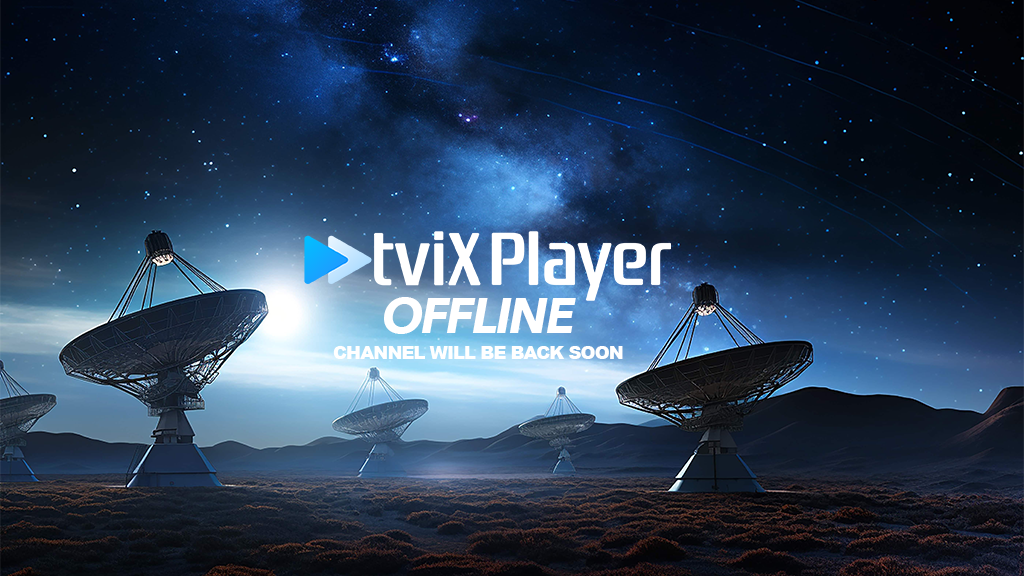
<style>
.page{position:relative;width:1024px;height:576px}
.page>*{position:absolute;margin:0}
.t1{font:50px "AvenirNext-BoldItalic";letter-spacing:-0.05em;color:#ffffff}
.t2{font:18px "Arial-Black";letter-spacing:-0.05em;color:#ffffff}
</style>
<div class="page">
<p class="t1" style="left:384px;top:297px;width:192px;height:37px">OFFLINE</p>
<p class="t2" style="left:333px;top:346px;width:290px;height:13px">CHANNEL WILL BE BACK SOON</p>
</div>
